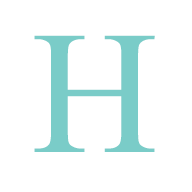
<style>
.page{position:relative;width:192px;height:192px;background:#ffffff}
.page>*{position:absolute;margin:0}
.t1{font:175.1px "MongolianBaiti";letter-spacing:0.025em;color:#7accc8}
</style>
<div class="page">
<p class="t1" style="left:34px;top:35px;width:121px;height:117px">H</p>
</div>
